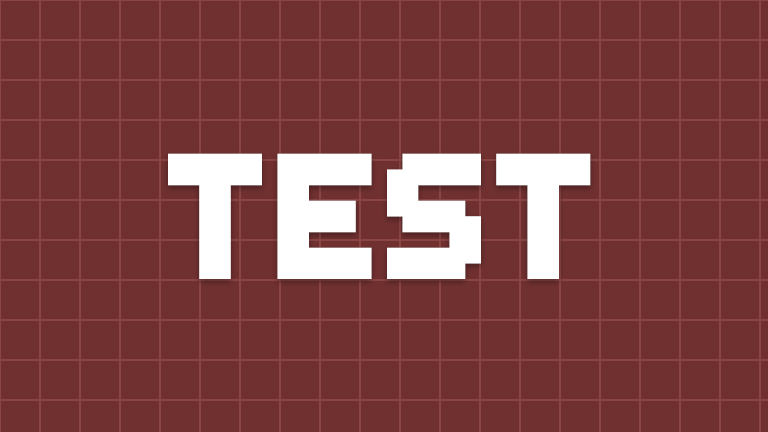
<style>
.page{position:relative;width:768px;height:432px;background:#703030}
.page>*{position:absolute;margin:0}
.t1{font:172px "Endless-Boss-Battle";color:#ffffff}
</style>
<div class="page">
<p class="t1" style="left:168px;top:153px;width:423px;height:126px">TEST</p>
</div>
